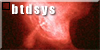
<style>
.page{position:relative;width:100px;height:50px}
.page>*{position:absolute;margin:0}
.t1{font:12.3px "Impact";letter-spacing:0.1em;color:#ffffff;scale:1.09 1}
</style>
<div class="page">
<p class="t1" style="left:12px;top:4px;width:43px;height:12px">btdsys</p>
</div>
